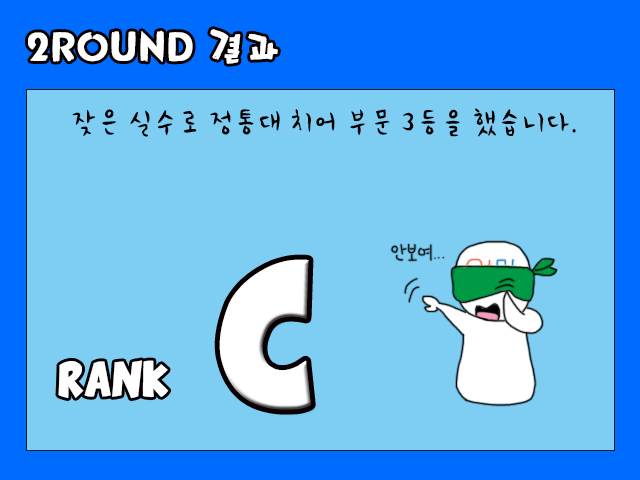
<style>
.page{position:relative;width:640px;height:480px;background:#7ecef4}
.page>*{position:absolute;margin:0}
.t1{font:36px "Mpop";color:#ffffff}
.t2{font:30px "PNHCartoon";color:#000000}
.t3{font:100px "ComixLoud";color:#ffffff}
.t4{font:24px "ComixLoud";color:#ffffff}
</style>
<div class="page">
<p class="t1" style="left:28px;top:29px;width:250px;height:35px">2ROUND 결과</p>
<p class="t2" style="left:72px;top:108px;width:504px;height:29px">잦은 실수로 정통대 치어 부문 3등을 했습니다.</p>
<p class="t3" style="left:219px;top:259px;width:92px;height:151px">C</p>
<p class="t4" style="left:58px;top:360px;width:111px;height:39px">RANK</p>
</div>
